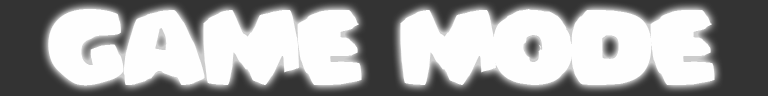
<style>
.page{position:relative;width:768px;height:96px;background:#fefefe}
.page>*{position:absolute;margin:0}
.t1{font:100px "Bomberman";color:#fefefe}
</style>
<div class="page">
<p class="t1" style="left:48px;top:9px;width:667px;height:77px">Game Mode</p>
</div>
